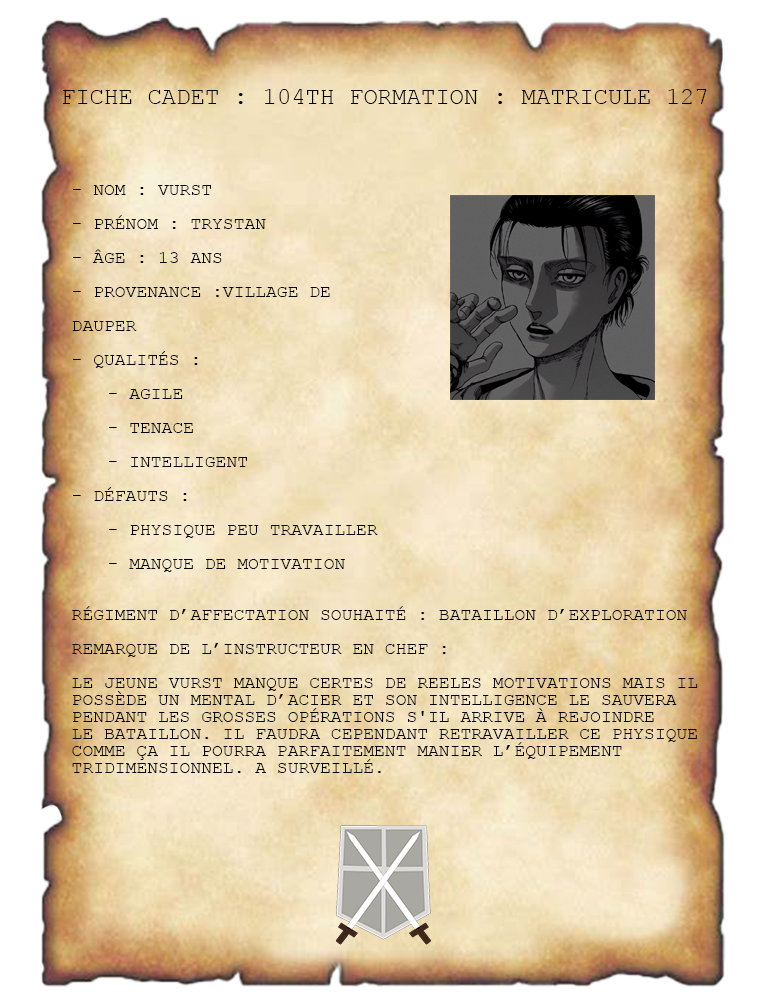
<style>
.page{position:relative;width:768px;height:1008px}
.page>*{position:absolute;margin:0}
.t1{font:24px "CourierNewPSMT";color:#000000;text-transform:uppercase}
.t2{font:18px/17px "CourierNewPSMT";color:#000000;text-transform:uppercase}
</style>
<div class="page">
<p class="t1" style="left:62px;top:89px;width:645px;height:15px">Fiche Cadet : 104TH Formation : Matricule 127</p>
<p class="t2" style="left:72px;top:185px;width:626px;height:588px">- Nom : Vurst<br><br>- PRénom : Trystan<br><br>- Âge : 13 ans<br><br>- Provenance :Village DE<br><br>Dauper<br><br>- Qualités :<br><br> - Agile <br><br> - Tenace<br><br> - Intelligent<br><br>- Défauts :<br><br> - physique peu travailler<br><br> - Manque de motivation<br><br><br>Régiment d’affectation souhaité : Bataillon d’exploration<br><br>Remarque de l’instructeur en chef :<br><br>Le jeune vurst manque certes de reeles motivations mais il<br>possède un mental d’acier et son intelligence le sauvera<br>pendant les grosses opérations s'il arrive à rejoindre<br>le bataillon. il faudra cependant retravailler ce physique<br>comme ça il pourra parfaitement manier l’équipement<br>tridimensionnel. A surveillé.</p>
</div>
